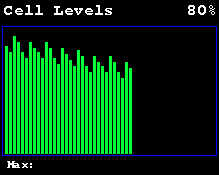
<style>
.page{position:relative;width:219px;height:175px;background:#000000}
.page>*{position:absolute;margin:0}
.t1{font:16px "Courier-Bold";color:#ffffff}
.t2{font:12px "Courier-Bold";color:#ffffff}
</style>
<div class="page">
<p class="t1" style="left:4px;top:5px;width:108px;height:10px">Cell Levels</p>
<p class="t1" style="left:188px;top:5px;width:27px;height:10px">80%</p>
<p class="t2" style="left:7px;top:161px;width:25px;height:7px">Max:</p>
</div>
